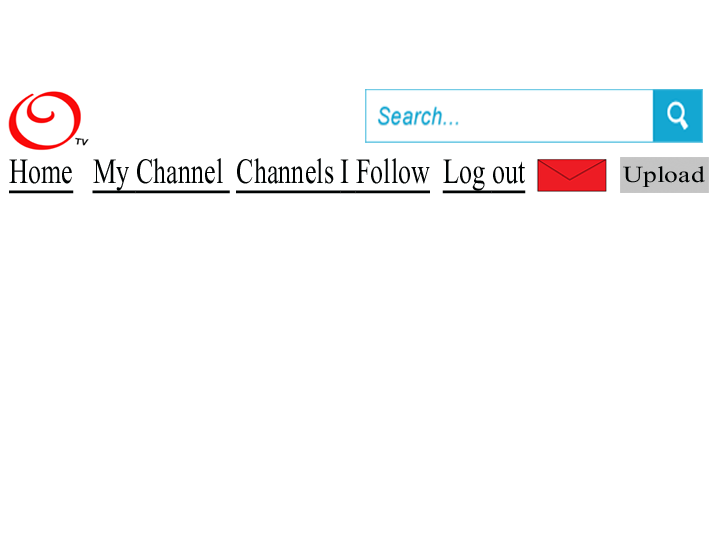
<style>
.page{position:relative;width:720px;height:534px;background:#ffffff}
.page>*{position:absolute;margin:0}
.t1{font:46px "Kokila";color:#000303;text-decoration:underline;scale:0.74 1}
.t2{font:29.4px "Kokila";color:#000303;scale:1.21 1}
</style>
<div class="page">
<p class="t1" style="left:9px;top:158px;width:517px;height:36px">Home   My Channel  Channels I Follow  Log out</p>
<p class="t2" style="left:623px;top:166px;width:82px;height:21px">Upload</p>
</div>
